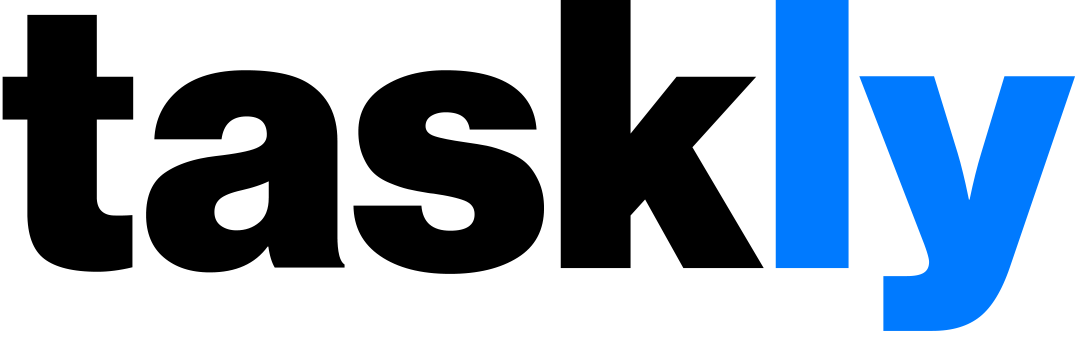
<style>
.page{position:relative;width:1091px;height:357px;background:#ffffff}
.page>*{position:absolute;margin:0}
.t1{font:375px "NeueHaasDisplay-Black";color:#000000}
.t2{font:375px "NeueHaasDisplay-Black";color:#007aff}
</style>
<div class="page">
<p class="t1" style="left:2px;top:0px;width:1073px;height:331px">task<span class="t2">ly</span></p>
</div>
